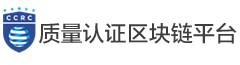
<style>
.page{position:relative;width:240px;height:65px;background:#ffffff}
.page>*{position:absolute;margin:0}
.t1{font:22.1px "FZLTZHUNHJW--GB1-0";color:#3e3e3e}
</style>
<div class="page">
<p class="t1" style="left:39px;top:22px;width:198px;height:22px">质量认证区块链平台</p>
</div>
